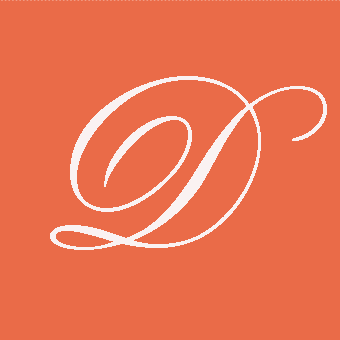
<style>
.page{position:relative;width:340px;height:340px;background:#ea6b48}
.page>*{position:absolute;margin:0}
.t1{font:236.1px "FlemishScriptBT-Regular";color:#faf2f2}
</style>
<div class="page">
<p class="t1" style="left:50px;top:76px;width:277px;height:174px">D</p>
</div>
